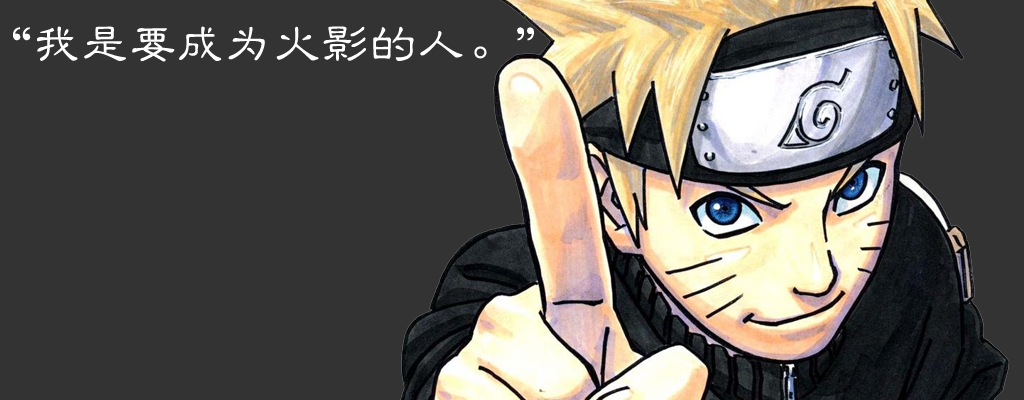
<style>
.page{position:relative;width:1024px;height:400px;background:#333333}
.page>*{position:absolute;margin:0}
.t1{font:48px "GBJenLei-Medium";color:#ffffff}
</style>
<div class="page">
<p class="t1" style="left:13px;top:26px;width:521px;height:36px">“我是要成为火影的人。”</p>
</div>
